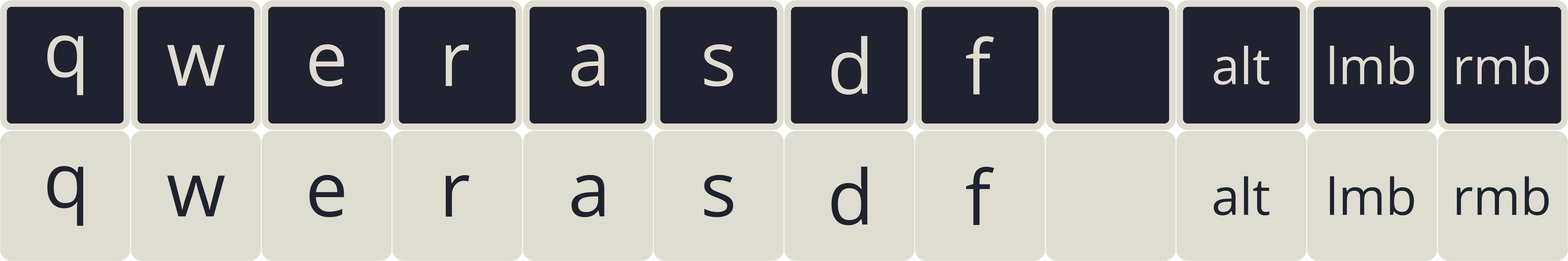
<style>
.page{position:relative;width:1568px;height:261px;background:#dfddd0}
.page>*{position:absolute;margin:0}
.t1{font:76.1px "OpenSans-Regular";color:#dfddd0}
.t2{font:50.8px "OpenSans-Regular";color:#dfddd0}
.t3{font:76.1px "OpenSans-Regular";color:#20222f}
.t4{font:50.8px "OpenSans-Regular";color:#20222f}
</style>
<div class="page">
<p class="t1" style="left:47px;top:35px;width:36px;height:60px">q</p>
<p class="t1" style="left:831px;top:36px;width:36px;height:59px">d</p>
<p class="t1" style="left:966px;top:36px;width:28px;height:58px">f</p>
<p class="t1" style="left:167px;top:45px;width:58px;height:41px">w</p>
<p class="t1" style="left:309px;top:44px;width:35px;height:43px">e</p>
<p class="t1" style="left:446px;top:44px;width:23px;height:42px">r</p>
<p class="t1" style="left:571px;top:44px;width:33px;height:43px">a</p>
<p class="t1" style="left:704px;top:44px;width:29px;height:43px">s</p>
<p class="t2" style="left:1213px;top:46px;width:56px;height:39px">alt</p>
<p class="t2" style="left:1330px;top:46px;width:84px;height:39px">lmb</p>
<p class="t2" style="left:1457px;top:46px;width:92px;height:39px">rmb</p>
<p class="t3" style="left:47px;top:166px;width:36px;height:60px">q</p>
<p class="t3" style="left:831px;top:167px;width:36px;height:58px">d</p>
<p class="t3" style="left:966px;top:167px;width:28px;height:58px">f</p>
<p class="t3" style="left:167px;top:176px;width:58px;height:40px">w</p>
<p class="t3" style="left:309px;top:175px;width:35px;height:42px">e</p>
<p class="t3" style="left:446px;top:175px;width:23px;height:42px">r</p>
<p class="t3" style="left:571px;top:175px;width:33px;height:42px">a</p>
<p class="t3" style="left:704px;top:175px;width:29px;height:42px">s</p>
<p class="t4" style="left:1213px;top:176px;width:56px;height:39px">alt</p>
<p class="t4" style="left:1330px;top:176px;width:84px;height:39px">lmb</p>
<p class="t4" style="left:1457px;top:176px;width:92px;height:39px">rmb</p>
</div>
